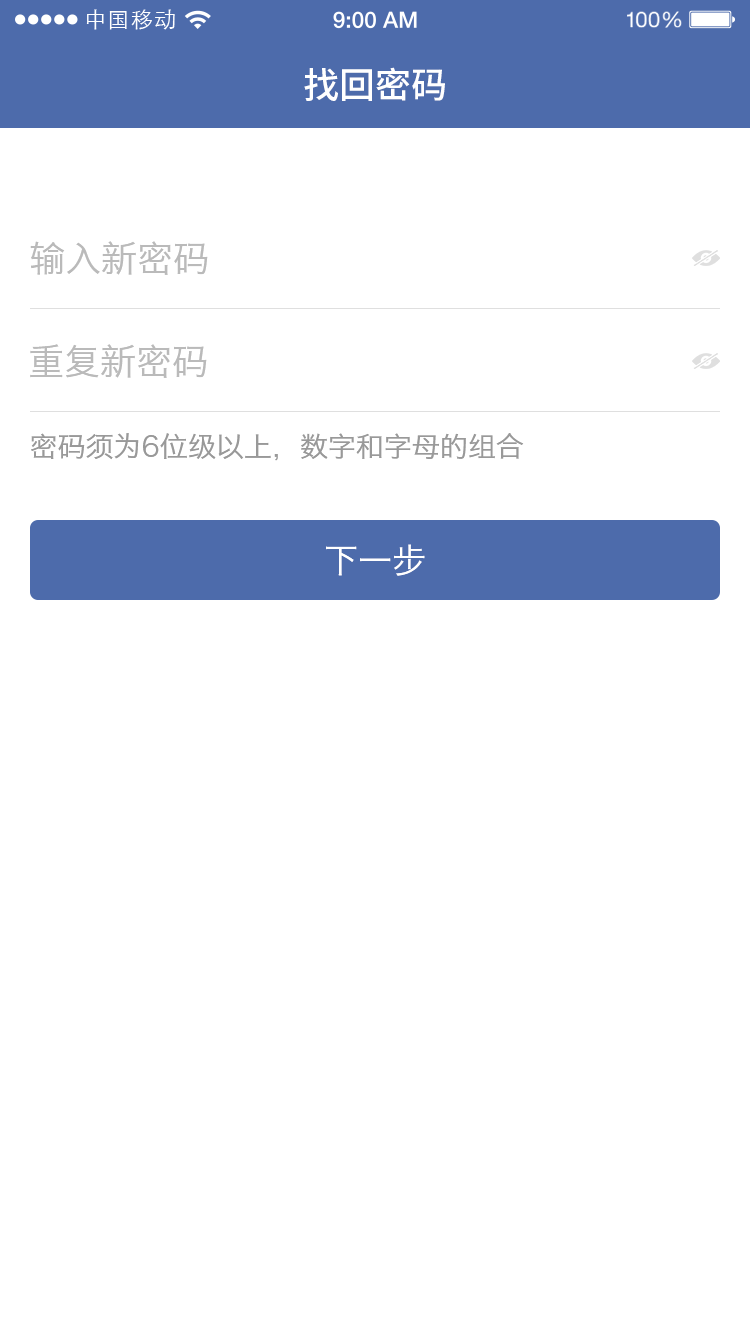
<style>
.page{position:relative;width:750px;height:1334px;background:#ffffff}
.page>*{position:absolute;margin:0}
.t1{font:21.9px "STXihei";letter-spacing:0.04em;color:#ffffff}
.t2{font:36px "NotoSansHans-Medium";color:#ffffff}
.t3{font:36px "HiraginoSansGB-W3";color:#bababa}
.t4{font:28px "HiraginoSansGB-W3";color:#999999}
.t5{font:34px "HiraginoSansGB-W3";color:#ffffff}
</style>
<div class="page">
<p class="t1" style="left:86px;top:9px;width:89px;height:21px">中国移动</p>
<p class="t2" style="left:304px;top:67px;width:141px;height:34px">找回密码</p>
<p class="t3" style="left:30px;top:241px;width:178px;height:34px">输入新密码</p>
<p class="t3" style="left:30px;top:344px;width:177px;height:34px">重复新密码</p>
<p class="t4" style="left:31px;top:433px;width:493px;height:28px">密码须为6位级以上，数字和字母的组合</p>
<p class="t5" style="left:326px;top:544px;width:99px;height:32px">下一步</p>
</div>
